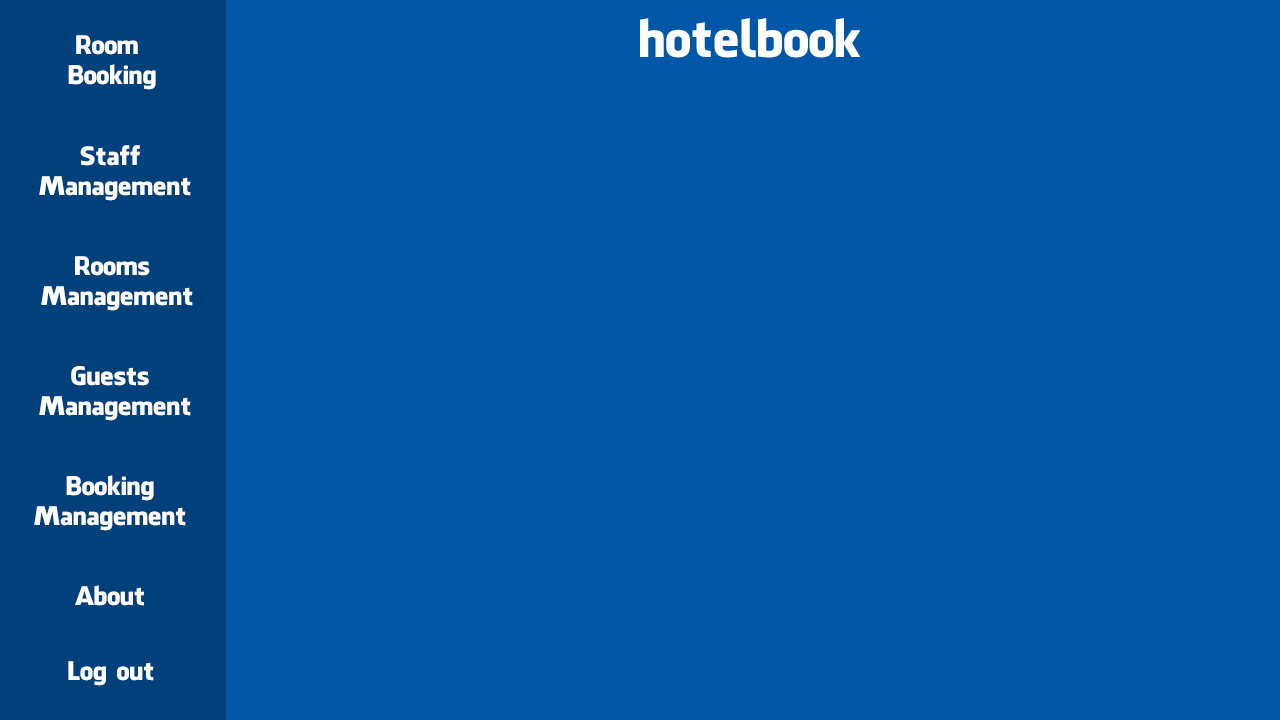
<style>
.page{position:relative;width:1280px;height:720px;background:#0057a7}
.page>*{position:absolute;margin:0}
.t1{font:25px "FacebookLetterFaces";color:#ffffff}
</style>
<div class="page">
<p class="t1" style="left:68px;top:35px;width:88px;height:55px;text-align:center">Room <br>Booking</p>
<p class="t1" style="left:39px;top:145px;width:152px;height:56px;text-align:center">Staff <br>Management</p>
<p class="t1" style="left:41px;top:256px;width:152px;height:55px;text-align:center">Rooms <br>Management</p>
<p class="t1" style="left:39px;top:366px;width:152px;height:55px;text-align:center">Guests <br>Management</p>
<p class="t1" style="left:34px;top:475px;width:152px;height:56px;text-align:center">Booking<br>Management</p>
<p class="t1" style="left:75px;top:585px;width:69px;height:21px">About</p>
<p class="t1" style="left:68px;top:661px;width:86px;height:25px">Log out</p>
</div>
